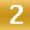
<style>
.page{position:relative;width:30px;height:30px}
.page>*{position:absolute;margin:0}
.t1{font:25px "Silom";color:#ffffff}
</style>
<div class="page">
<p class="t1" style="left:10px;top:5px;width:13px;height:19px">2</p>
</div>
